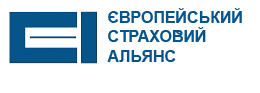
<style>
.page{position:relative;width:260px;height:93px;background:#ffffff}
.page>*{position:absolute;margin:0}
.t1{font:16px "Arial-BoldMT";color:#06548b}
</style>
<div class="page">
<p class="t1" style="left:108px;top:8px;width:134px;height:15px">ЄВРОПЕЙСЬКИЙ</p>
<p class="t1" style="left:108px;top:27px;width:98px;height:15px">СТРАХОВИЙ</p>
<p class="t1" style="left:107px;top:50px;width:69px;height:12px">АЛЬЯНС</p>
</div>
